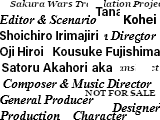
<style>
.page{position:relative;width:160px;height:120px;background:#ffffff}
.page>*{position:absolute;margin:0}
.t1{font:12.5px "TimesNewRomanPS-BoldItalicMT";color:#000000}
.t2{font:12.5px "AcuminPro-Bold";color:#000000}
.t3{font:12.5px "AcuminPro-Bold";letter-spacing:-0.04em;color:#000000}
.t4{font:12.5px "AcuminPro-Bold";letter-spacing:-0.06em;color:#000000}
.t5{font:12.5px "AcuminPro-Bold";letter-spacing:-0.08em;color:#000000}
.t6{font:12.5px "AcuminPro-Bold";letter-spacing:-0.02em;color:#000000}
.t7{font:12.5px "TimesNewRomanPS-BoldItalicMT";letter-spacing:0.04em;color:#000000}
.t8{font:12.5px "AcuminPro-Bold";letter-spacing:-0.05em;color:#000000}
.t9{font:12.5px "TimesNewRomanPS-BoldItalicMT";letter-spacing:-0.04em;color:#000000}
</style>
<div class="page">
<p class="t1" style="left:0px;top:15px;width:97px;height:9px">Editor &amp; Scenario</p>
<p class="t2" style="left:95px;top:7px;width:20px;height:9px"><span class="t3">T</span>an</p>
<p class="t2" style="left:0px;top:30px;width:98px;height:12px">S<span class="t4">h</span>o<span class="t5">i</span>c<span class="t6">h</span>iro <span class="t3">I</span>r<span class="t3">i</span>m<span class="t3">a</span>jiri</p>
<p class="t1" style="left:110px;top:31px;width:46px;height:9px"><span class="t7">D</span>irector</p>
<p class="t2" style="left:0px;top:46px;width:43px;height:12px">O<span class="t4">j</span>i <span class="t4">H</span>i<span class="t6">r</span>oi</p>
<p class="t2" style="left:53px;top:46px;width:107px;height:12px">Kousuke Fu<span class="t3">j</span>is<span class="t3">h</span>ima</p>
<p class="t2" style="left:2px;top:62px;width:85px;height:10px">Satoru Aka<span class="t8">h</span>ori</p>
<p class="t2" style="left:92px;top:62px;width:20px;height:10px">aka</p>
<p class="t1" style="left:3px;top:79px;width:149px;height:12px">Composer &amp; Music Direct<span class="t9">o</span>r</p>
<p class="t1" style="left:0px;top:95px;width:94px;height:9px">General Pro<span class="t9">d</span>ucer</p>
<p class="t1" style="left:0px;top:111px;width:60px;height:9px">Production</p>
<p class="t1" style="left:73px;top:111px;width:54px;height:9px">Character</p>
<p class="t1" style="left:112px;top:103px;width:49px;height:12px">Designer</p>
</div>
